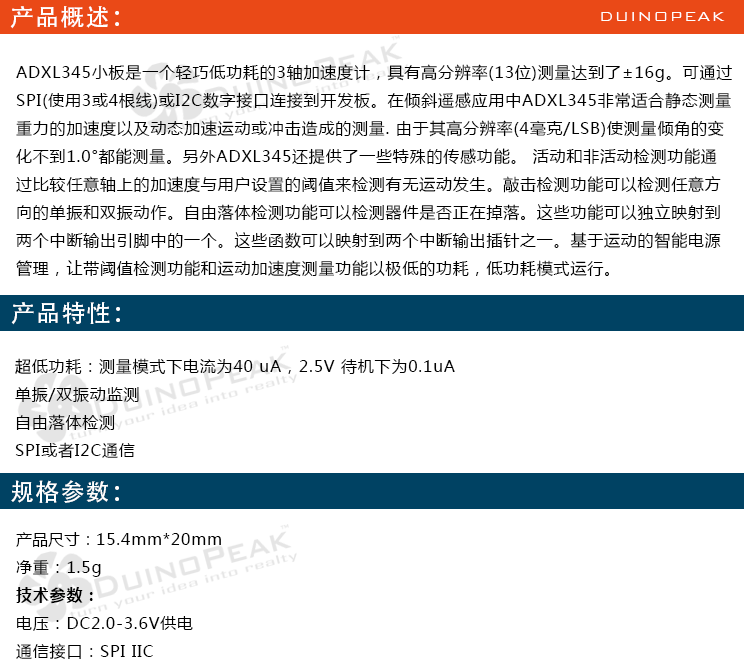
<style>
.page{position:relative;width:744px;height:671px;background:#ffffff}
.page>*{position:absolute;margin:0}
.t1{font:24px "AdobeHeitiStd-Regular";letter-spacing:0.05em;color:#ffffff}
.t2{font:18px "BankGothicBT-Light";letter-spacing:0.05em;color:#ffffff}
.t3{font:16px "MicrosoftYaHei";letter-spacing:0.05em;color:#000000}
.t4{font:16px "MicrosoftYaHei";color:#000000}
.t5{font:16px "MicrosoftYaHei-Bold";letter-spacing:0.05em;color:#000000}
</style>
<div class="page">
<p class="t1" style="left:10px;top:6px;width:109px;height:23px">产品概述：</p>
<p class="t2" style="left:601px;top:12px;width:124px;height:9px">DUINOPEAK</p>
<p class="t3" style="left:16px;top:64px;width:716px;height:213px">ADXL345小板是一个轻巧低功耗的3轴加速度计，具有高分辨率(13位)测量达到了±16g。可通过<br>SPI(使用3或4根线)或I2C数字接口连接到开发板。在倾斜遥感应用中ADXL345非常适合静态测量<br>重力的加速度以及动态加速运动或冲击造成的测量. 由于其高分辨率(4毫克/LSB)使测量倾角的变<br>化不到1.0°都能测量。另外ADXL345还提供了一些特殊的传感功能。 活动和非活动检测功能通<br>过比较任意轴上的加速度与用户设置的阈值来检测有无运动发生。敲击检测功能可以检测任意方<br>向的单振和双振动作。自由落体检测功能可以检测器件是否正在掉落。这些功能可以独立映射到<br>两个中断输出引脚中的一个。这些函数可以映射到两个中断输出插针之一。基于运动的智能电源<br>管理，让带阈值检测功能和运动加速度测量功能以极低的功耗，低功耗模式运行。</p>
<p class="t1" style="left:11px;top:301px;width:109px;height:24px">产品特性：</p>
<p class="t3" style="left:15px;top:358px;width:440px;height:101px">超低功耗：测量模式下电流为40 uA，2.5V 待机下为0.1uA<br>单振/双振动监测<br>自由落体检测<br>SPI或者I2C通信</p>
<p class="t1" style="left:11px;top:480px;width:108px;height:23px">规格参数：</p>
<p class="t3" style="left:16px;top:532px;width:205px;height:127px"><span class="t4">产品尺寸：</span>15.4mm*20mm<br>净重：1.5g<br><span class="t5">技术参数：<br></span>电压：DC2.0-3.6V供电<br>通信接口：SPI IIC</p>
</div>
